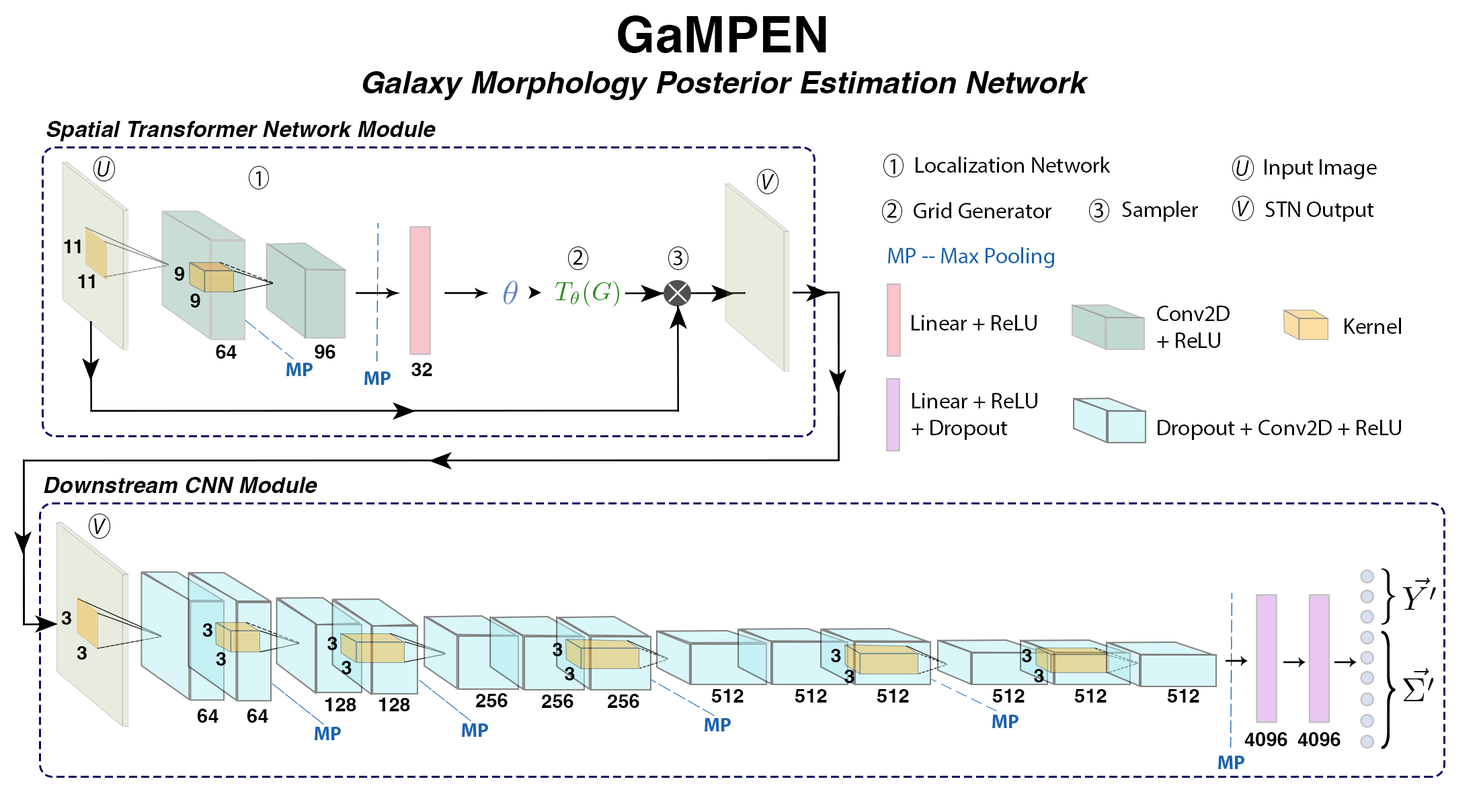
<style>
.page{position:relative;width:1479px;height:806px;background:#ffffff}
.page>*{position:absolute;margin:0}
.t1{font:50.4px "Helvetica-Bold";color:#000000}
.t2{font:30.8px "Helvetica-BoldOblique";color:#000000}
.t3{font:22.4px "Helvetica-BoldOblique";color:#000000}
.t4{font:22.4px "MyriadPro-It";color:#000000}
.t5{font:22.4px "MyriadPro-Regular";color:#000000}
.t6{font:19.6px "Helvetica-Bold";color:#000000}
.t7{font:22.4px "MyriadPro-Regular";color:#1864ae}
.t8{font:19.6px "MyriadPro-Bold";color:#1864ae}
</style>
<div class="page">
<p class="t1" style="left:618px;top:15px;width:208px;height:38px">GaMPEN</p>
<p class="t2" style="left:362px;top:71px;width:727px;height:29px">Galaxy Morphology Posterior Estimation Network</p>
<p class="t3" style="left:46px;top:121px;width:390px;height:21px">Spatial Transformer Network Module</p>
<p class="t4" style="left:97px;top:161px;width:13px;height:16px">U</p>
<p class="t5" style="left:890px;top:159px;width:5px;height:15px">1</p>
<p class="t5" style="left:915px;top:157px;width:195px;height:16px">Localization Network</p>
<p class="t4" style="left:1236px;top:161px;width:13px;height:15px">U</p>
<p class="t5" style="left:1264px;top:159px;width:112px;height:20px">Input Image</p>
<p class="t5" style="left:255px;top:171px;width:6px;height:15px">1</p>
<p class="t4" style="left:762px;top:174px;width:12px;height:16px">V</p>
<p class="t5" style="left:886px;top:203px;width:11px;height:15px">2</p>
<p class="t5" style="left:913px;top:202px;width:138px;height:16px">Grid Generator</p>
<p class="t5" style="left:1093px;top:203px;width:10px;height:15px">3</p>
<p class="t5" style="left:1122px;top:201px;width:76px;height:21px">Sampler</p>
<p class="t4" style="left:1237px;top:201px;width:12px;height:15px">V</p>
<p class="t5" style="left:1265px;top:202px;width:109px;height:20px">STN Output</p>
<p class="t6" style="left:64px;top:239px;width:17px;height:14px">11</p>
<p class="t5" style="left:573px;top:250px;width:10px;height:15px">2</p>
<p class="t5" style="left:673px;top:251px;width:9px;height:14px">3</p>
<p class="t7" style="left:888px;top:247px;width:166px;height:21px">MP -- Max Pooling</p>
<p class="t6" style="left:174px;top:267px;width:11px;height:14px">9</p>
<p class="t6" style="left:78px;top:274px;width:17px;height:14px">11</p>
<p class="t6" style="left:190px;top:294px;width:10px;height:14px">9</p>
<p class="t5" style="left:1157px;top:306px;width:72px;height:42px">Conv2D <br>+ ReLU</p>
<p class="t5" style="left:911px;top:315px;width:125px;height:16px">Linear + ReLU</p>
<p class="t5" style="left:1344px;top:318px;width:57px;height:16px">Kernel</p>
<p class="t6" style="left:216px;top:345px;width:21px;height:14px">64</p>
<p class="t6" style="left:315px;top:345px;width:20px;height:14px">96</p>
<p class="t8" style="left:286px;top:363px;width:27px;height:13px">MP</p>
<p class="t6" style="left:411px;top:363px;width:21px;height:13px">32</p>
<p class="t8" style="left:364px;top:372px;width:26px;height:13px">MP</p>
<p class="t5" style="left:911px;top:393px;width:126px;height:47px">Linear + ReLU <br>+ Dropout</p>
<p class="t5" style="left:1157px;top:420px;width:244px;height:20px">Dropout + Conv2D + ReLU</p>
<p class="t3" style="left:44px;top:477px;width:273px;height:16px">Downstream CNN Module</p>
<p class="t4" style="left:94px;top:519px;width:12px;height:15px">V</p>
<p class="t6" style="left:61px;top:612px;width:10px;height:13px">3</p>
<p class="t6" style="left:202px;top:624px;width:10px;height:13px">3</p>
<p class="t6" style="left:327px;top:637px;width:10px;height:14px">3</p>
<p class="t6" style="left:77px;top:647px;width:10px;height:13px">3</p>
<p class="t6" style="left:216px;top:653px;width:10px;height:13px">3</p>
<p class="t6" style="left:552px;top:643px;width:11px;height:14px">3</p>
<p class="t6" style="left:831px;top:649px;width:10px;height:14px">3</p>
<p class="t6" style="left:1022px;top:649px;width:10px;height:14px">3</p>
<p class="t6" style="left:341px;top:661px;width:10px;height:14px">3</p>
<p class="t6" style="left:565px;top:667px;width:10px;height:14px">3</p>
<p class="t6" style="left:844px;top:670px;width:10px;height:13px">3</p>
<p class="t6" style="left:1034px;top:669px;width:10px;height:14px">3</p>
<p class="t6" style="left:711px;top:689px;width:32px;height:14px">512</p>
<p class="t6" style="left:794px;top:689px;width:33px;height:14px">512</p>
<p class="t6" style="left:876px;top:689px;width:33px;height:14px">512</p>
<p class="t6" style="left:992px;top:689px;width:32px;height:14px">512</p>
<p class="t6" style="left:1074px;top:689px;width:32px;height:14px">512</p>
<p class="t6" style="left:1167px;top:689px;width:32px;height:14px">512</p>
<p class="t6" style="left:325px;top:698px;width:31px;height:14px">128</p>
<p class="t6" style="left:379px;top:698px;width:31px;height:14px">128</p>
<p class="t6" style="left:475px;top:694px;width:32px;height:14px">256</p>
<p class="t6" style="left:541px;top:694px;width:32px;height:14px">256</p>
<p class="t6" style="left:607px;top:694px;width:32px;height:14px">256</p>
<p class="t6" style="left:197px;top:709px;width:21px;height:14px">64</p>
<p class="t6" style="left:247px;top:709px;width:21px;height:14px">64</p>
<p class="t8" style="left:462px;top:724px;width:26px;height:13px">MP</p>
<p class="t8" style="left:704px;top:718px;width:27px;height:14px">MP</p>
<p class="t8" style="left:992px;top:715px;width:26px;height:14px">MP</p>
<p class="t8" style="left:315px;top:727px;width:26px;height:14px">MP</p>
<p class="t6" style="left:1244px;top:733px;width:43px;height:14px">4096</p>
<p class="t6" style="left:1297px;top:733px;width:43px;height:14px">4096</p>
<p class="t8" style="left:1218px;top:756px;width:26px;height:14px">MP</p>
</div>
